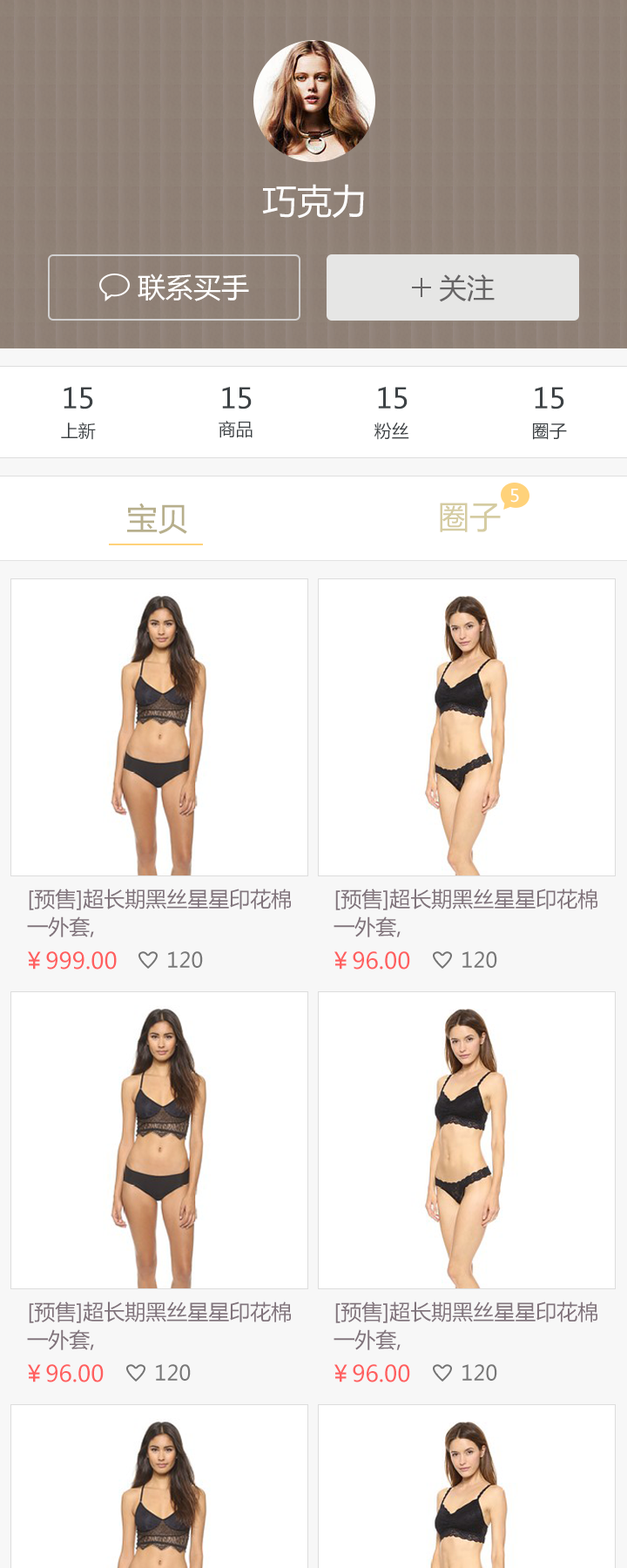
<style>
.page{position:relative;width:627px;height:1568px;background:#ffffff}
.page>*{position:absolute;margin:0}
.t1{font:34.8px "MicrosoftYaHei";color:#fdfdfd}
.t2{font:27.9px "MicrosoftYaHei";color:#ffffff}
.t3{font:27.9px "MicrosoftYaHei";color:#676566}
.t4{font:27.9px "MicrosoftYaHei";color:#3d4245}
.t5{font:17.4px "MicrosoftYaHei";color:#3d4245}
.t6{font:17.4px "MicrosoftYaHei";color:#ffffff}
.t7{font:31.4px "MicrosoftYaHei";color:#b7af8c}
.t8{font:31.4px "MicrosoftYaHei";color:#d5cca2}
.t9{font:20.9px/27.9px "MicrosoftYaHei";color:#80737b}
.t10{font:22.6px "MicrosoftYaHei";color:#ff5f5f}
.t11{font:20.9px "MicrosoftYaHei";color:#777777}
</style>
<div class="page">
<p class="t1" style="left:262px;top:184px;width:102px;height:35px">巧克力</p>
<p class="t2" style="left:138px;top:274px;width:111px;height:27px">联系买手</p>
<p class="t3" style="left:439px;top:274px;width:56px;height:28px">关注</p>
<p class="t4" style="left:64px;top:387px;width:29px;height:22px">15</p>
<p class="t4" style="left:222px;top:387px;width:30px;height:22px">15</p>
<p class="t4" style="left:378px;top:387px;width:30px;height:22px">15</p>
<p class="t4" style="left:535px;top:387px;width:29px;height:22px">15</p>
<p class="t5" style="left:61px;top:422px;width:35px;height:18px">上新</p>
<p class="t5" style="left:219px;top:421px;width:34px;height:17px">商品</p>
<p class="t5" style="left:375px;top:422px;width:34px;height:18px">粉丝</p>
<p class="t5" style="left:533px;top:423px;width:34px;height:17px">圈子</p>
<p class="t6" style="left:510px;top:489px;width:9px;height:14px">5</p>
<p class="t7" style="left:127px;top:503px;width:60px;height:31px">宝贝</p>
<p class="t8" style="left:440px;top:503px;width:61px;height:29px">圈子</p>
<p class="t9" style="left:27px;top:889px;width:264px;height:48px">[预售]超长期黑丝星星印花棉<br>一外套,</p>
<p class="t9" style="left:334px;top:889px;width:264px;height:48px">[预售]超长期黑丝星星印花棉<br>一外套,</p>
<p class="t10" style="left:28px;top:951px;width:89px;height:19px">￥999.00</p>
<p class="t11" style="left:168px;top:951px;width:35px;height:17px">120</p>
<p class="t10" style="left:335px;top:951px;width:75px;height:19px">￥96.00</p>
<p class="t11" style="left:463px;top:951px;width:34px;height:17px">120</p>
<p class="t9" style="left:27px;top:1301px;width:264px;height:49px">[预售]超长期黑丝星星印花棉<br>一外套,</p>
<p class="t9" style="left:334px;top:1301px;width:264px;height:49px">[预售]超长期黑丝星星印花棉<br>一外套,</p>
<p class="t10" style="left:28px;top:1364px;width:76px;height:18px">￥96.00</p>
<p class="t11" style="left:156px;top:1364px;width:35px;height:17px">120</p>
<p class="t10" style="left:335px;top:1364px;width:75px;height:18px">￥96.00</p>
<p class="t11" style="left:463px;top:1364px;width:34px;height:17px">120</p>
</div>
